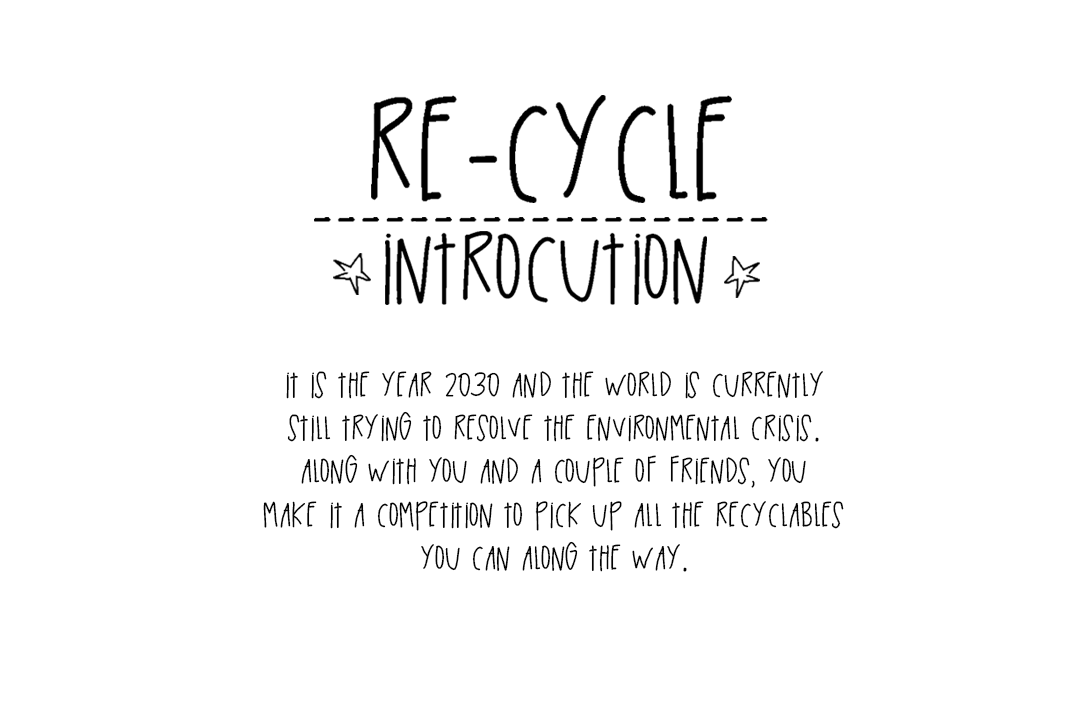
<style>
.page{position:relative;width:1080px;height:720px;background:#ffffff}
.page>*{position:absolute;margin:0}
.t1{font:36px "BlackTinBox";color:#030303}
</style>
<div class="page">
<p class="t1" style="left:263px;top:371px;width:581px;height:201px;text-align:center">It is the year 2030 and the world is currently <br>still trying to resolve the environmental crisis. <br>Along with you and a couple of friends, you <br>make it a competition to pick up all the recyclables <br>you can along the way.</p>
</div>
